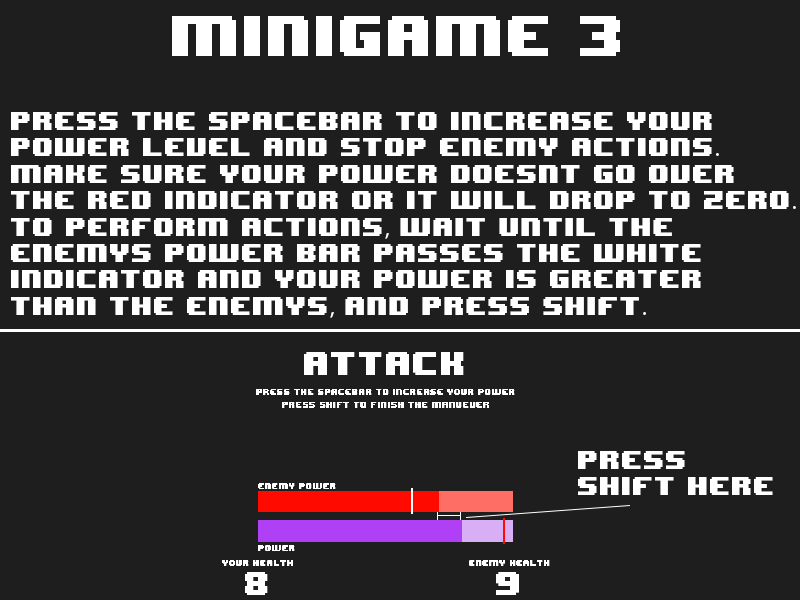
<style>
.page{position:relative;width:800px;height:600px;background:#1e1e1e}
.page>*{position:absolute;margin:0}
.t1{font:48px "8BITWONDERNominal";color:#ffffff}
.t2{font:22px "8BITWONDERNominal";color:#ffffff}
.t3{font:22px "MyriadPro-Regular";color:#ffffff}
</style>
<div class="page">
<p class="t1" style="left:172px;top:16px;width:448px;height:40px">minigame 3</p>
<p class="t2" style="left:11px;top:112px;width:785px;height:206px">press the spacebar to increase your<br>power level and stop enemy actions<span class="t3">.</span><br>make sure your power doesnt go over<br>the red indicator or it will drop to zero<span class="t3">.</span><br>to perform actions<span class="t3">,</span> wait until the<br>enemys power bar passes the white<br>indicator and your power is greater<br>than the enemys<span class="t3">,</span> and press shift<span class="t3">.</span></p>
<p class="t2" style="left:578px;top:451px;width:195px;height:44px">press<br>shift here</p>
</div>
